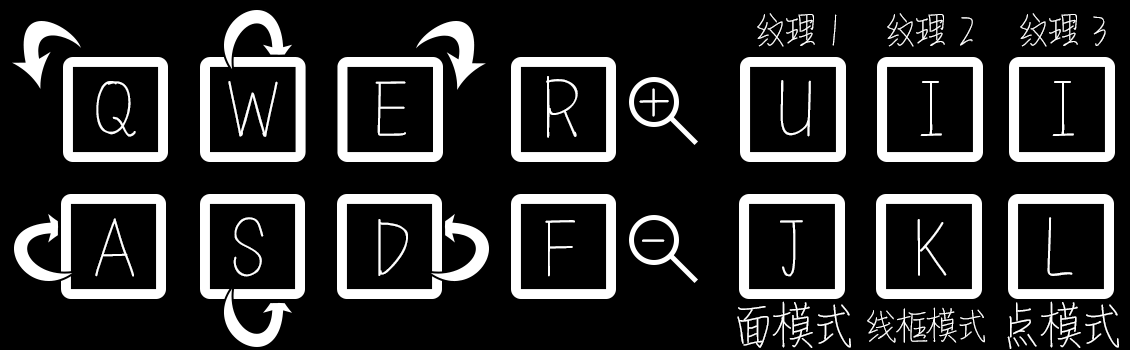
<style>
.page{position:relative;width:1130px;height:350px;background:#000000}
.page>*{position:absolute;margin:0}
.t1{font:36px "MFQingShu_Noncommercial-Regular";color:#ffffff}
.t2{font:67px "MFQingShu_Noncommercial-Regular";color:#ffffff}
.t3{font:74.5px "MFQingShu_Noncommercial-Regular";color:#ffffff}
.t4{font:47.8px "MFQingShu_Noncommercial-Regular";color:#ffffff}
</style>
<div class="page">
<p class="t1" style="left:757px;top:13px;width:80px;height:34px">纹理  1</p>
<p class="t1" style="left:887px;top:13px;width:86px;height:34px">纹理  2</p>
<p class="t1" style="left:1020px;top:13px;width:86px;height:34px">纹理  3</p>
<p class="t2" style="left:546px;top:76px;width:32px;height:62px">R</p>
<p class="t2" style="left:96px;top:81px;width:40px;height:56px">Q</p>
<p class="t2" style="left:228px;top:81px;width:50px;height:56px">W</p>
<p class="t2" style="left:375px;top:81px;width:31px;height:55px">E</p>
<p class="t3" style="left:639px;top:88px;width:30px;height:29px">+</p>
<p class="t2" style="left:780px;top:80px;width:31px;height:57px">U</p>
<p class="t2" style="left:920px;top:81px;width:22px;height:55px">I</p>
<p class="t2" style="left:1052px;top:81px;width:22px;height:55px">I</p>
<p class="t2" style="left:95px;top:218px;width:39px;height:59px">A</p>
<p class="t2" style="left:233px;top:217px;width:31px;height:60px">S</p>
<p class="t2" style="left:378px;top:219px;width:30px;height:57px">D</p>
<p class="t2" style="left:545px;top:220px;width:30px;height:57px">F</p>
<p class="t2" style="left:780px;top:220px;width:23px;height:57px">J</p>
<p class="t2" style="left:917px;top:219px;width:30px;height:57px">K</p>
<p class="t2" style="left:1047px;top:217px;width:26px;height:59px">L</p>
<p class="t3" style="left:642px;top:239px;width:23px;height:3px">-</p>
<p class="t4" style="left:737px;top:301px;width:114px;height:47px">面模式</p>
<p class="t4" style="left:1007px;top:301px;width:112px;height:48px">点模式</p>
<p class="t1" style="left:867px;top:307px;width:118px;height:36px">线框模式</p>
</div>
